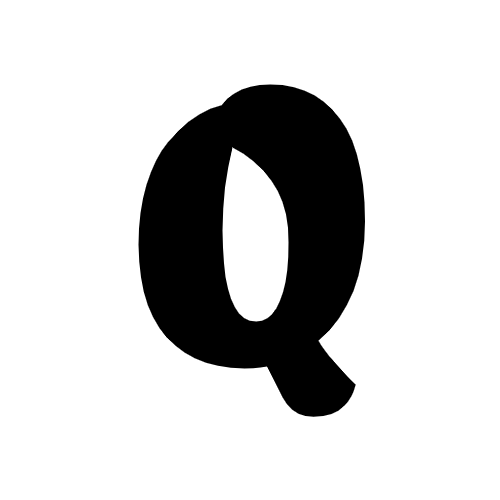
<style>
.page{position:relative;width:500px;height:500px;background:#ffffff}
.page>*{position:absolute;margin:0}
.t1{font:400px "ChelaOne-Regular";color:#000000}
</style>
<div class="page">
<p class="t1" style="left:138px;top:84px;width:227px;height:333px">Q</p>
</div>
